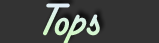
<style>
.page{position:relative;width:159px;height:43px;background:#333333}
.page>*{position:absolute;margin:0}
.t1{font:48px "SantaFeLetPlain";color:#d8f5db}
</style>
<div class="page">
<p class="t1" style="left:43px;top:3px;width:57px;height:40px">Tops</p>
</div>
